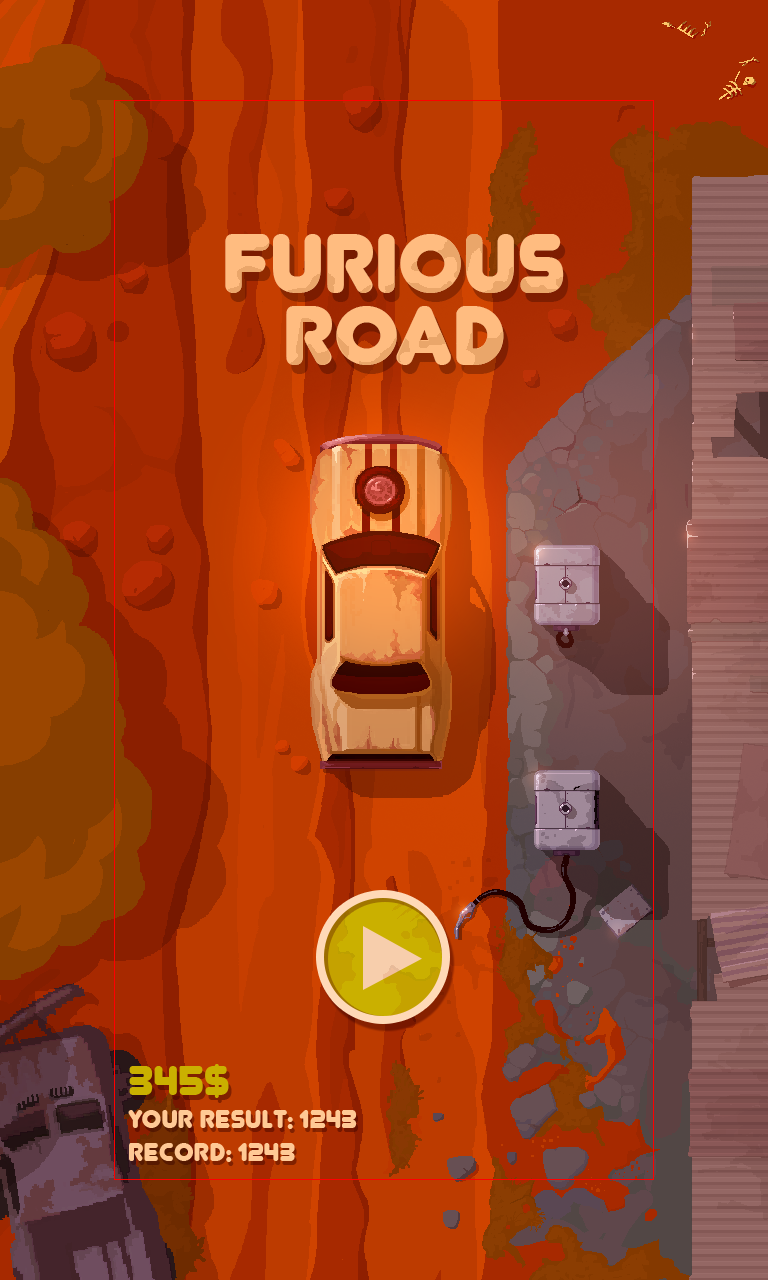
<style>
.page{position:relative;width:768px;height:1280px}
.page>*{position:absolute;margin:0}
.t1{font:84px/72px "Junegull-Regular";color:#ffbc80}
.t2{font:48px "Junegull";color:#cab000}
.t3{font:30px "Junegull";color:#ffc995}
</style>
<div class="page">
<p class="t1" style="left:225px;top:234px;width:339px;height:131px;text-align:center">FURIOUS<br>ROAD</p>
<p class="t2" style="left:129px;top:1064px;width:100px;height:34px">345$</p>
<p class="t3" style="left:128px;top:1110px;width:229px;height:19px">Your result: 1243</p>
<p class="t3" style="left:129px;top:1143px;width:166px;height:19px">RECORD: 1243</p>
</div>
